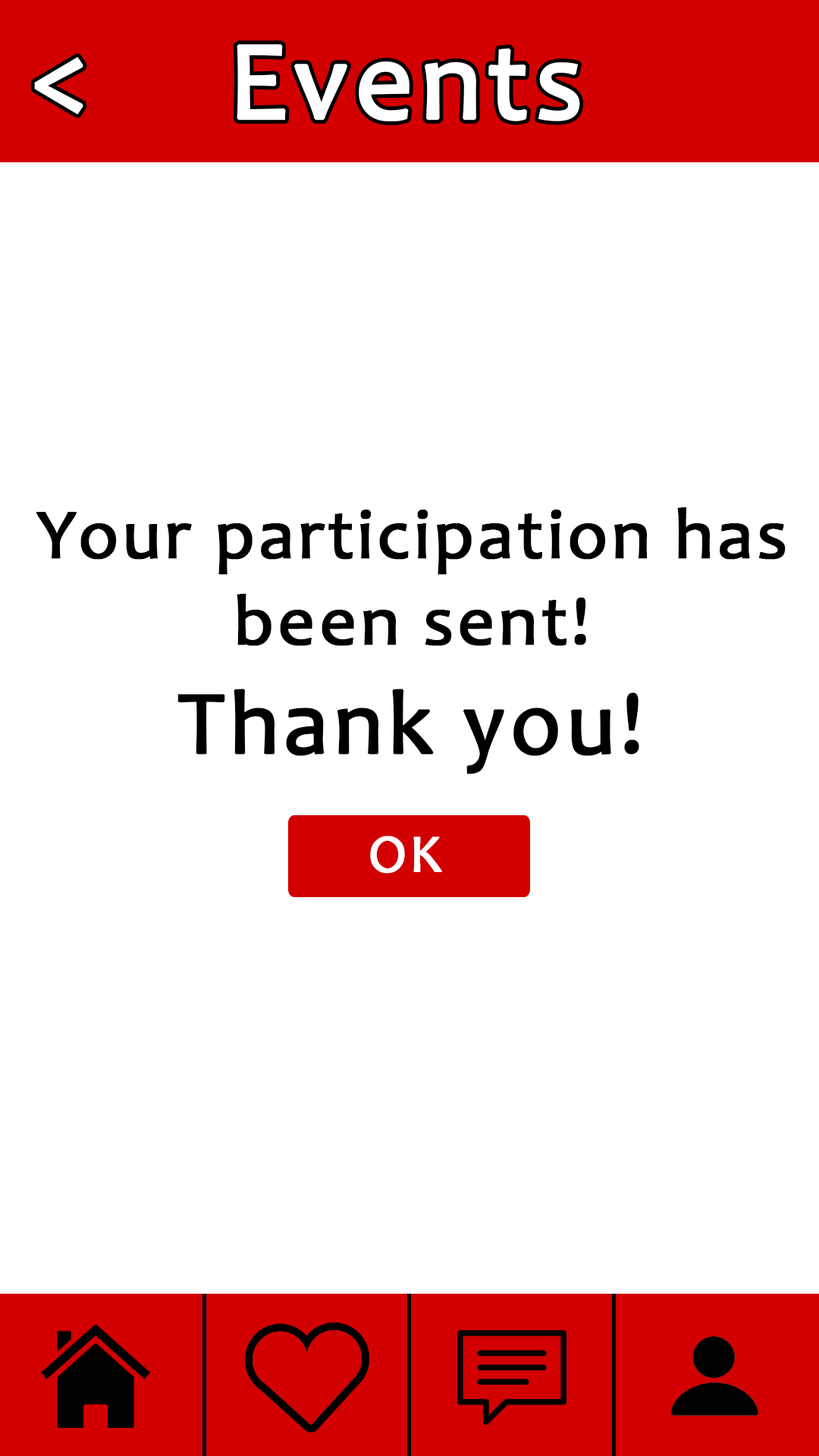
<style>
.page{position:relative;width:819px;height:1456px;background:#ffffff}
.page>*{position:absolute;margin:0}
.t1{font:113.4px "Candara";letter-spacing:0.03em;color:#ffffff;font-weight:bold}
.t2{font:113.7px "Candara";letter-spacing:0.03em;color:#ffffff;font-weight:bold}
.t3{font:72px "Candara";letter-spacing:0.03em;color:#000000;font-weight:bold}
.t4{font:91px "Candara";letter-spacing:0.03em;color:#000000;font-weight:bold}
.t5{font:54.3px "Candara";letter-spacing:0.03em;color:#ffffff;font-weight:bold}
</style>
<div class="page">
<p class="t1" style="left:237px;top:44px;width:343px;height:78px">Events</p>
<p class="t2" style="left:34px;top:57px;width:49px;height:58px">&lt;</p>
<p class="t3" style="left:36px;top:507px;width:750px;height:267px;text-align:center">Your participation has<br>been sent!<br><span class="t4">Thank you!</span></p>
<p class="t5" style="left:370px;top:836px;width:72px;height:38px">OK</p>
</div>
